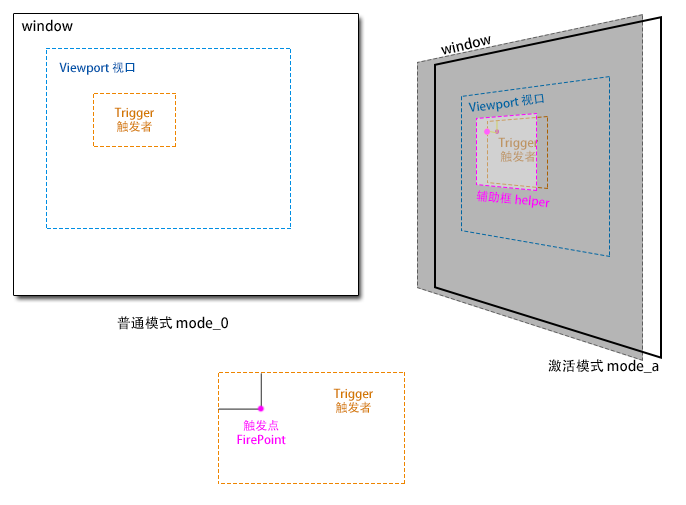
<style>
.page{position:relative;width:686px;height:505px;background:#ffffff}
.page>*{position:absolute;margin:0}
.t1{font:14px "AdobeHeitiStd-Regular";color:#000000}
.t2{font:12px "AdobeHeitiStd-Regular";color:#0053a8}
.t3{font:12px "AdobeHeitiStd-Regular";color:#0065a2}
.t4{font:12px/14px "AdobeHeitiStd-Regular";color:#d37702}
.t5{font:12px/14px "AdobeHeitiStd-Regular";color:#be9562}
.t6{font:12px "AdobeHeitiStd-Regular";color:#ff00ff}
.t7{font:12px/14px "AdobeHeitiStd-Regular";color:#ff00ff}
</style>
<div class="page">
<p class="t1" style="left:21px;top:19px;width:52px;height:13px">window</p>
<p class="t1" style="left:440px;top:36px;width:51px;height:19px;rotate:-13deg">window</p>
<p class="t2" style="left:59px;top:62px;width:76px;height:13px">Viewport 视口</p>
<p class="t3" style="left:468px;top:94px;width:76px;height:18px;rotate:-7deg">Viewport 视口</p>
<p class="t4" style="left:114px;top:107px;width:40px;height:25px;text-align:center">Trigger<br>触发者</p>
<p class="t5" style="left:498px;top:137px;width:40px;height:25px;text-align:center">Trigger <br>触发者</p>
<p class="t6" style="left:476px;top:190px;width:74px;height:18px;rotate:6deg">辅助框 helper</p>
<p class="t1" style="left:117px;top:316px;width:111px;height:14px">普通模式 mode_0</p>
<p class="t1" style="left:548px;top:359px;width:111px;height:14px">激活模式 mode_a</p>
<p class="t4" style="left:333px;top:388px;width:40px;height:25px;text-align:center">Trigger<br>触发者</p>
<p class="t7" style="left:237px;top:420px;width:49px;height:25px;text-align:center">触发点<br>FirePoint</p>
</div>
